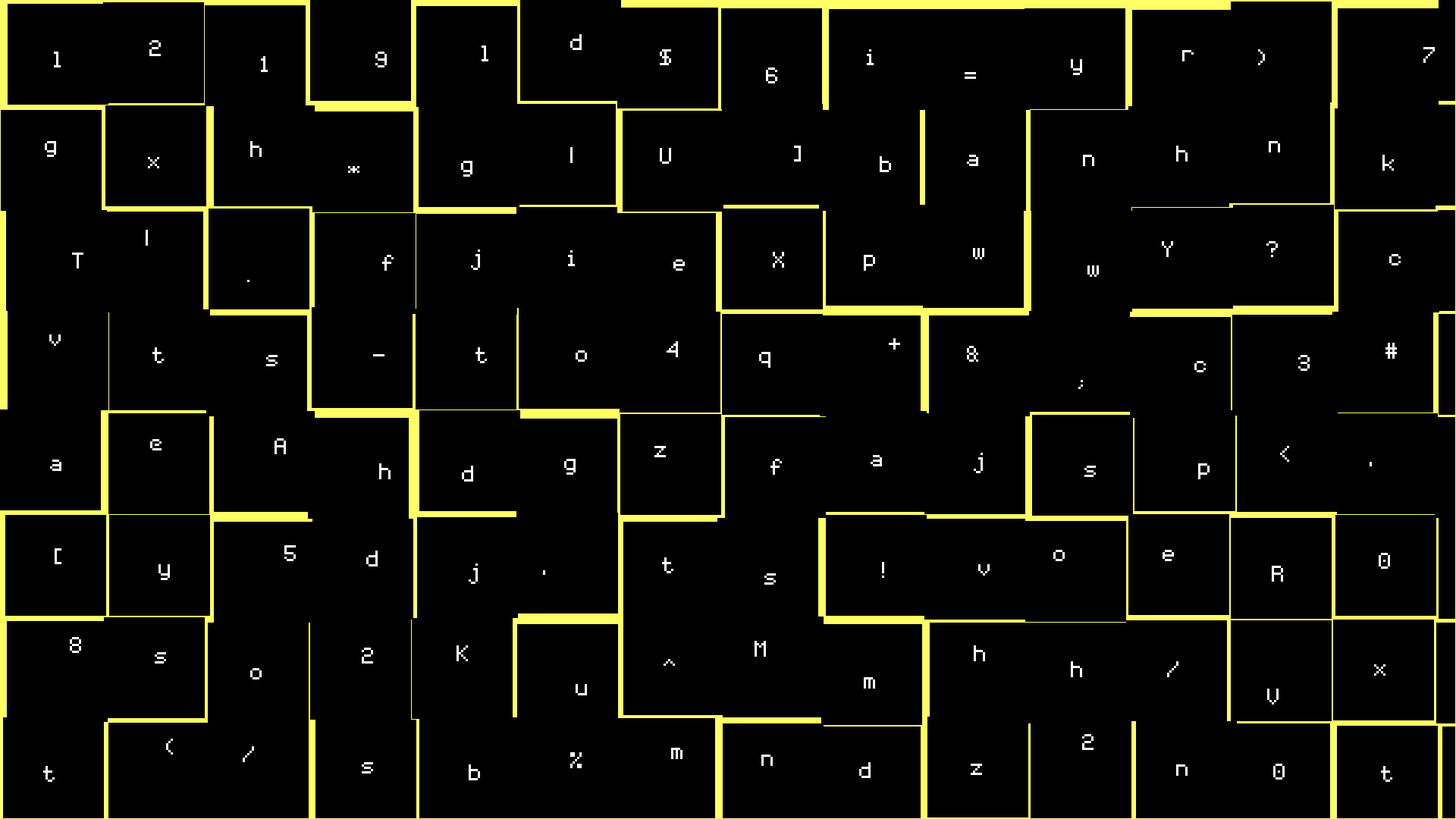
<style>
.page{position:relative;width:1456px;height:819px;background:#000000}
.page>*{position:absolute;margin:0}
.t1{font:36.4px "Coder's-Crux";color:#ffffff}
</style>
<div class="page">
<p class="t1" style="left:149px;top:40px;width:12px;height:16px">2</p>
<p class="t1" style="left:570px;top:34px;width:12px;height:16px">d</p>
<p class="t1" style="left:54px;top:52px;width:7px;height:15px">l</p>
<p class="t1" style="left:375px;top:52px;width:12px;height:15px">9</p>
<p class="t1" style="left:482px;top:45px;width:6px;height:16px">l</p>
<p class="t1" style="left:660px;top:49px;width:11px;height:16px">$</p>
<p class="t1" style="left:867px;top:49px;width:7px;height:16px">i</p>
<p class="t1" style="left:1182px;top:50px;width:12px;height:11px">r</p>
<p class="t1" style="left:1258px;top:49px;width:7px;height:16px">)</p>
<p class="t1" style="left:1423px;top:47px;width:12px;height:16px">7</p>
<p class="t1" style="left:261px;top:56px;width:7px;height:16px">1</p>
<p class="t1" style="left:1071px;top:59px;width:11px;height:16px">y</p>
<p class="t1" style="left:766px;top:67px;width:11px;height:16px">6</p>
<p class="t1" style="left:965px;top:72px;width:11px;height:7px">=</p>
<p class="t1" style="left:45px;top:141px;width:11px;height:16px">g</p>
<p class="t1" style="left:250px;top:141px;width:12px;height:16px">h</p>
<p class="t1" style="left:660px;top:148px;width:11px;height:16px">U</p>
<p class="t1" style="left:794px;top:146px;width:7px;height:16px">]</p>
<p class="t1" style="left:1176px;top:146px;width:12px;height:16px">h</p>
<p class="t1" style="left:1269px;top:141px;width:11px;height:11px">n</p>
<p class="t1" style="left:148px;top:157px;width:11px;height:11px">x</p>
<p class="t1" style="left:461px;top:161px;width:11px;height:16px">g</p>
<p class="t1" style="left:880px;top:156px;width:11px;height:16px">b</p>
<p class="t1" style="left:967px;top:155px;width:11px;height:11px">a</p>
<p class="t1" style="left:1083px;top:155px;width:11px;height:11px">n</p>
<p class="t1" style="left:1382px;top:155px;width:12px;height:16px">k</p>
<p class="t1" style="left:348px;top:166px;width:11px;height:7px">*</p>
<p class="t1" style="left:1162px;top:241px;width:11px;height:16px">Y</p>
<p class="t1" style="left:1266px;top:241px;width:12px;height:16px">?</p>
<p class="t1" style="left:72px;top:253px;width:11px;height:15px">T</p>
<p class="t1" style="left:382px;top:255px;width:12px;height:16px">f</p>
<p class="t1" style="left:471px;top:249px;width:9px;height:21px">j</p>
<p class="t1" style="left:568px;top:250px;width:7px;height:16px">i</p>
<p class="t1" style="left:773px;top:252px;width:11px;height:16px">X</p>
<p class="t1" style="left:864px;top:255px;width:11px;height:16px">p</p>
<p class="t1" style="left:973px;top:248px;width:11px;height:11px">w</p>
<p class="t1" style="left:1389px;top:254px;width:12px;height:11px">c</p>
<p class="t1" style="left:673px;top:259px;width:12px;height:12px">e</p>
<p class="t1" style="left:1087px;top:265px;width:12px;height:12px">w</p>
<p class="t1" style="left:49px;top:334px;width:12px;height:12px">v</p>
<p class="t1" style="left:667px;top:341px;width:11px;height:16px">4</p>
<p class="t1" style="left:889px;top:338px;width:11px;height:12px">+</p>
<p class="t1" style="left:152px;top:347px;width:12px;height:16px">t</p>
<p class="t1" style="left:475px;top:347px;width:12px;height:16px">t</p>
<p class="t1" style="left:576px;top:350px;width:11px;height:12px">o</p>
<p class="t1" style="left:759px;top:352px;width:11px;height:16px">q</p>
<p class="t1" style="left:967px;top:346px;width:11px;height:16px">&amp;</p>
<p class="t1" style="left:1385px;top:343px;width:12px;height:16px">#</p>
<p class="t1" style="left:266px;top:355px;width:12px;height:11px">s</p>
<p class="t1" style="left:1194px;top:361px;width:12px;height:11px">c</p>
<p class="t1" style="left:1298px;top:355px;width:12px;height:16px">3</p>
<p class="t1" style="left:1078px;top:380px;width:5px;height:9px">;</p>
<p class="t1" style="left:150px;top:439px;width:12px;height:11px">@</p>
<p class="t1" style="left:275px;top:438px;width:11px;height:16px">A</p>
<p class="t1" style="left:654px;top:446px;width:12px;height:11px">z</p>
<p class="t1" style="left:1280px;top:446px;width:9px;height:16px">&lt;</p>
<p class="t1" style="left:50px;top:460px;width:11px;height:11px">a</p>
<p class="t1" style="left:564px;top:459px;width:12px;height:16px">g</p>
<p class="t1" style="left:770px;top:459px;width:12px;height:16px">f</p>
<p class="t1" style="left:871px;top:455px;width:11px;height:11px">a</p>
<p class="t1" style="left:974px;top:453px;width:9px;height:20px">j</p>
<p class="t1" style="left:379px;top:463px;width:12px;height:16px">h</p>
<p class="t1" style="left:462px;top:466px;width:11px;height:16px">d</p>
<p class="t1" style="left:1084px;top:466px;width:12px;height:11px">s</p>
<p class="t1" style="left:1198px;top:463px;width:12px;height:16px">p</p>
<p class="t1" style="left:284px;top:545px;width:12px;height:16px">5</p>
<p class="t1" style="left:55px;top:548px;width:6px;height:16px">[</p>
<p class="t1" style="left:366px;top:551px;width:12px;height:15px">d</p>
<p class="t1" style="left:662px;top:557px;width:11px;height:16px">t</p>
<p class="t1" style="left:1053px;top:550px;width:12px;height:11px">o</p>
<p class="t1" style="left:1163px;top:550px;width:11px;height:11px">e</p>
<p class="t1" style="left:1379px;top:553px;width:11px;height:16px">0</p>
<p class="t1" style="left:158px;top:564px;width:12px;height:16px">y</p>
<p class="t1" style="left:469px;top:563px;width:9px;height:21px">j</p>
<p class="t1" style="left:882px;top:562px;width:2px;height:16px">!</p>
<p class="t1" style="left:978px;top:564px;width:12px;height:12px">v</p>
<p class="t1" style="left:1272px;top:566px;width:11px;height:16px">R</p>
<p class="t1" style="left:764px;top:573px;width:12px;height:12px">s</p>
<p class="t1" style="left:70px;top:637px;width:11px;height:16px">8</p>
<p class="t1" style="left:755px;top:641px;width:11px;height:16px">M</p>
<p class="t1" style="left:155px;top:652px;width:11px;height:12px">s</p>
<p class="t1" style="left:362px;top:648px;width:11px;height:16px">2</p>
<p class="t1" style="left:457px;top:645px;width:11px;height:16px">K</p>
<p class="t1" style="left:974px;top:645px;width:11px;height:16px">h</p>
<p class="t1" style="left:664px;top:659px;width:11px;height:7px">^</p>
<p class="t1" style="left:1071px;top:661px;width:11px;height:16px">h</p>
<p class="t1" style="left:1167px;top:661px;width:11px;height:16px">/</p>
<p class="t1" style="left:1374px;top:664px;width:11px;height:12px">x</p>
<p class="t1" style="left:250px;top:668px;width:12px;height:11px">o</p>
<p class="t1" style="left:864px;top:677px;width:11px;height:12px">m</p>
<p class="t1" style="left:576px;top:684px;width:11px;height:11px">u</p>
<p class="t1" style="left:1267px;top:689px;width:12px;height:15px">V</p>
<p class="t1" style="left:1082px;top:734px;width:12px;height:16px">2</p>
<p class="t1" style="left:166px;top:739px;width:7px;height:16px">(</p>
<p class="t1" style="left:243px;top:746px;width:11px;height:16px">/</p>
<p class="t1" style="left:671px;top:748px;width:11px;height:11px">m</p>
<p class="t1" style="left:570px;top:752px;width:12px;height:16px">%</p>
<p class="t1" style="left:761px;top:755px;width:12px;height:11px">n</p>
<p class="t1" style="left:43px;top:766px;width:12px;height:16px">t</p>
<p class="t1" style="left:362px;top:762px;width:11px;height:11px">s</p>
<p class="t1" style="left:469px;top:764px;width:11px;height:16px">b</p>
<p class="t1" style="left:859px;top:762px;width:12px;height:16px">d</p>
<p class="t1" style="left:971px;top:764px;width:11px;height:11px">z</p>
<p class="t1" style="left:1176px;top:764px;width:12px;height:12px">n</p>
<p class="t1" style="left:1273px;top:764px;width:12px;height:16px">0</p>
<p class="t1" style="left:1381px;top:766px;width:11px;height:16px">t</p>
</div>
